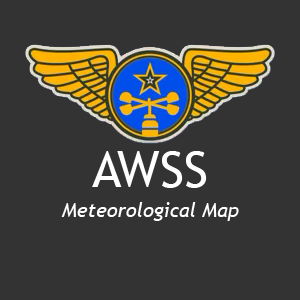
<style>
.page{position:relative;width:300px;height:300px;background:#333333}
.page>*{position:absolute;margin:0}
.t1{font:50px "TrebuchetMS";color:#ffffff}
.t2{font:20px "TrebuchetMS-Italic";color:#ffffff}
</style>
<div class="page">
<p class="t1" style="left:92px;top:151px;width:115px;height:37px">AWSS</p>
<p class="t2" style="left:61px;top:202px;width:178px;height:19px">Meteorological Map</p>
</div>
